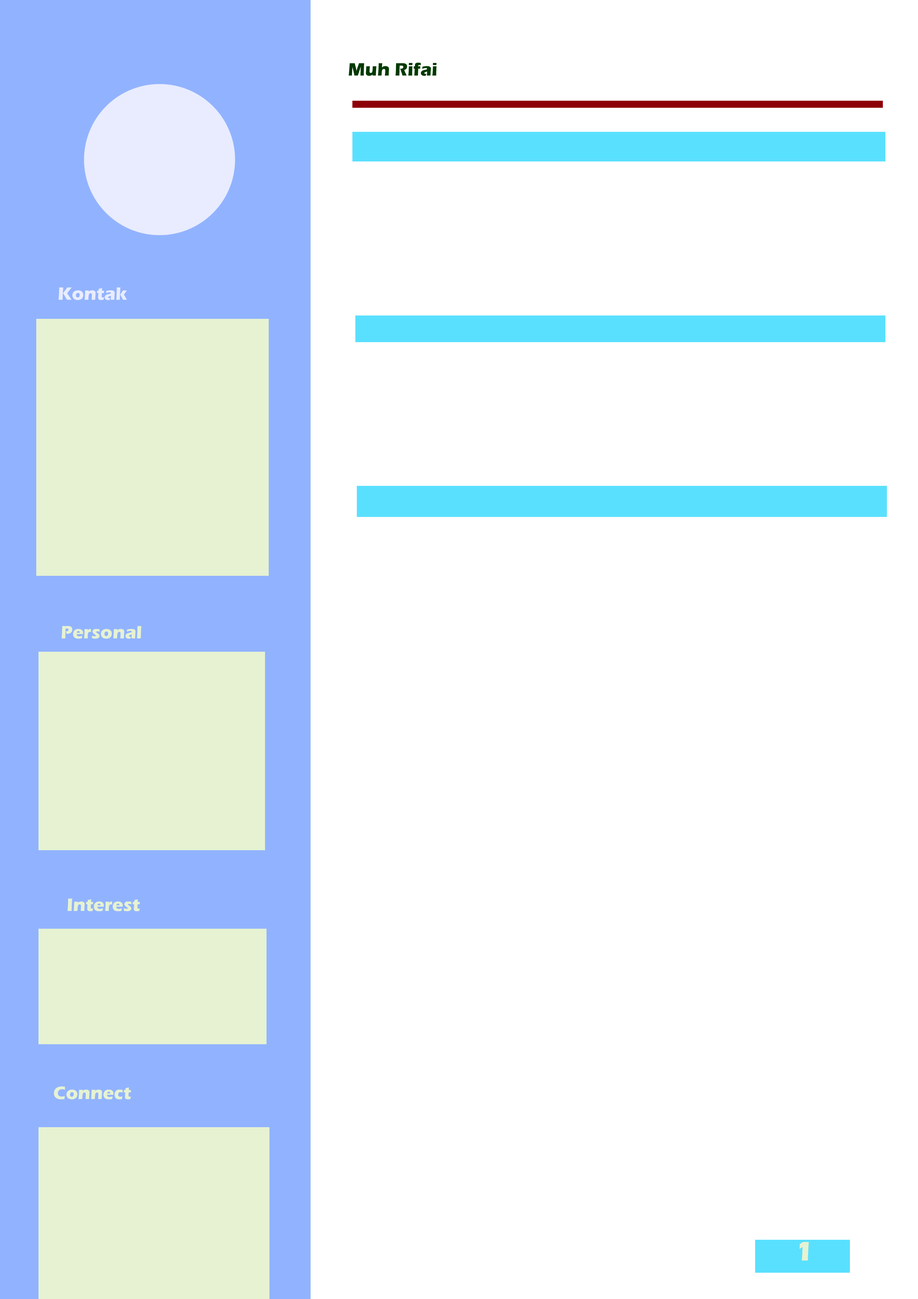
<style>
.page{position:relative;width:918px;height:1299px;background:#ffffff}
.page>*{position:absolute;margin:0}
.t1{font:18.5px "ErasITC-Bold";color:#003a00}
.t2{font:18.5px "ErasITC-Bold";color:#e9ecff}
.t3{font:18.5px "ErasITC-Bold";color:#e6f2d2}
.t4{font:27.8px "ErasITC-Bold";color:#e6f2d2}
</style>
<div class="page">
<p class="t1" style="left:349px;top:63px;width:88px;height:13px">Muh Rifai</p>
<p class="t2" style="left:58px;top:287px;width:69px;height:13px">Kontak</p>
<p class="t3" style="left:67px;top:898px;width:73px;height:13px">Interest</p>
<p class="t3" style="left:54px;top:1086px;width:77px;height:13px">Connect</p>
<p class="t4" style="left:800px;top:1242px;width:9px;height:18px">1</p>
</div>
